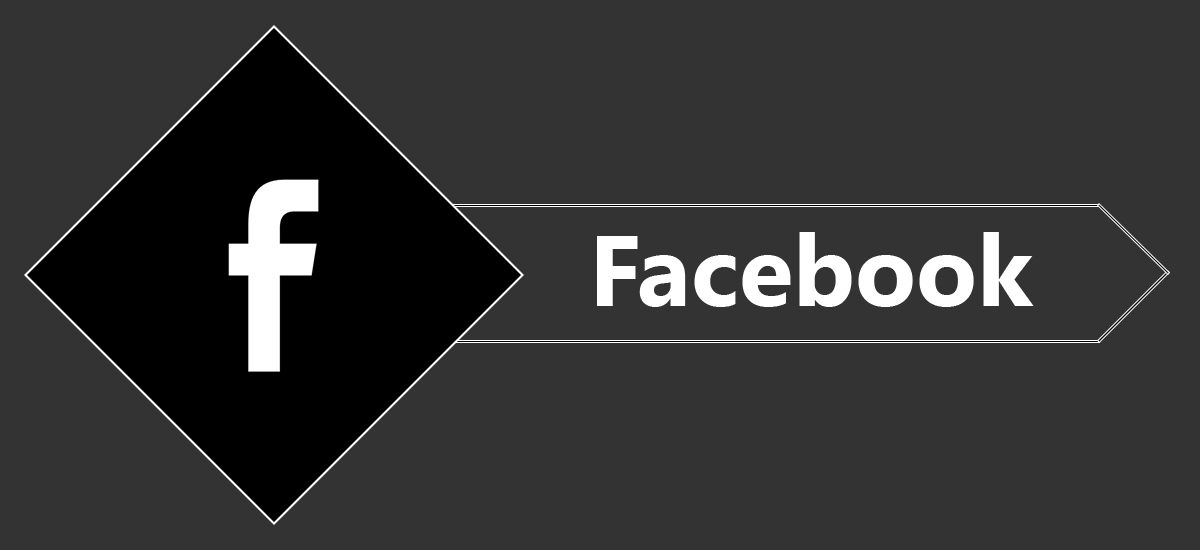
<style>
.page{position:relative;width:1200px;height:550px;background:#333333}
.page>*{position:absolute;margin:0}
.t1{font:100px "KhmerUI-Bold";color:#ffffff}
</style>
<div class="page">
<p class="t1" style="left:597px;top:232px;width:437px;height:75px">Facebook</p>
</div>
